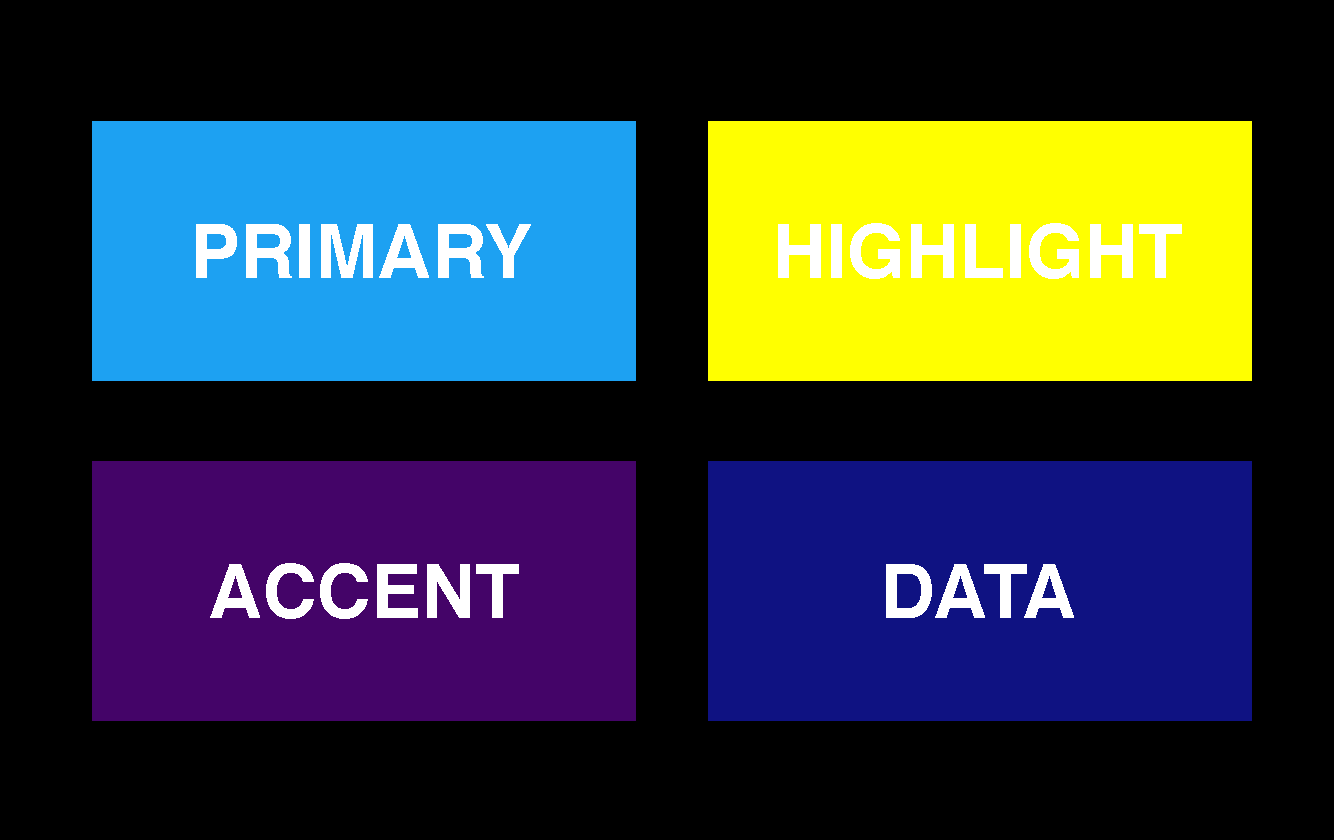
<style>
.page{position:relative;width:1334px;height:840px;background:#000000}
.page>*{position:absolute;margin:0}
.t1{font:75px "Helvetica-Bold";color:#ffffff}
</style>
<div class="page">
<p class="t1" style="left:196px;top:224px;width:335px;height:54px">PRIMARY</p>
<p class="t1" style="left:778px;top:223px;width:404px;height:56px">HIGHLIGHT</p>
<p class="t1" style="left:210px;top:563px;width:309px;height:56px">ACCENT</p>
<p class="t1" style="left:886px;top:564px;width:188px;height:54px">DATA</p>
</div>
